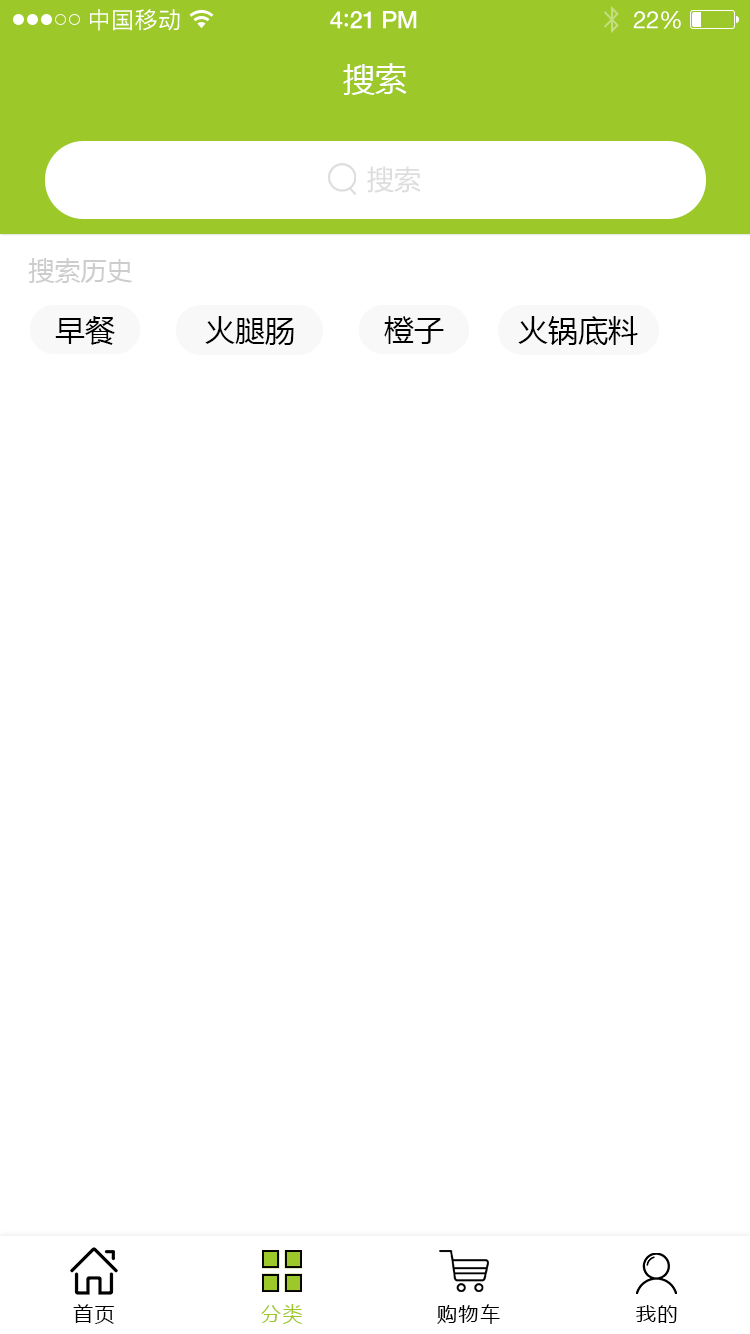
<style>
.page{position:relative;width:750px;height:1334px;background:#ffffff}
.page>*{position:absolute;margin:0}
.t1{font:23px "PingFangSC-Regular";letter-spacing:0.02em;color:#ffffff}
.t2{font:24px "HelveticaNeue-Medium";letter-spacing:-0.02em;color:#ffffff}
.t3{font:26px "Avenir-Medium";letter-spacing:-0.02em;color:#ffffff}
.t4{font:24px "HelveticaNeue";letter-spacing:-0.02em;color:#ffffff}
.t5{font:32px "MicrosoftYaHei";color:#ffffff;text-transform:uppercase}
.t6{font:26.9px "MicrosoftYaHei";color:#dddddd;text-transform:uppercase}
.t7{font:26px "MicrosoftYaHei";color:#cecece;text-transform:uppercase}
.t8{font:30px "MicrosoftYaHei";color:#000000;text-transform:uppercase}
.t9{font:20px "MicrosoftYaHei";letter-spacing:0.08em;color:#000000;text-transform:uppercase}
.t10{font:20px "MicrosoftYaHei";letter-spacing:0.08em;color:#9cc829;text-transform:uppercase}
</style>
<div class="page">
<p class="t1" style="left:90px;top:9px;width:90px;height:22px">中国移动</p>
<p class="t2" style="left:330px;top:11px;width:87px;height:18px">4<span class="t3">:</span>21 PM</p>
<p class="t4" style="left:633px;top:11px;width:48px;height:18px">22%</p>
<p class="t5" style="left:343px;top:63px;width:64px;height:32px">搜索</p>
<p class="t6" style="left:367px;top:166px;width:54px;height:27px">搜索</p>
<p class="t7" style="left:28px;top:258px;width:104px;height:25px">搜索历史</p>
<p class="t8" style="left:55px;top:316px;width:60px;height:29px">早餐</p>
<p class="t8" style="left:205px;top:316px;width:89px;height:29px">火腿肠</p>
<p class="t8" style="left:384px;top:316px;width:60px;height:28px">橙子</p>
<p class="t8" style="left:518px;top:316px;width:120px;height:29px">火锅底料</p>
<p class="t9" style="left:73px;top:1304px;width:41px;height:20px">首页</p>
<p class="t10" style="left:261px;top:1304px;width:42px;height:20px">分类</p>
<p class="t9" style="left:437px;top:1304px;width:63px;height:20px">购物车</p>
<p class="t9" style="left:636px;top:1305px;width:41px;height:18px">我的</p>
</div>
